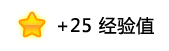
<style>
.page{position:relative;width:169px;height:51px;background:#ffffff}
.page>*{position:absolute;margin:0}
.t1{font:18px "MicrosoftYaHei";letter-spacing:0.04em;color:#000000}
</style>
<div class="page">
<p class="t1" style="left:58px;top:16px;width:96px;height:19px">+25 经验值</p>
</div>
